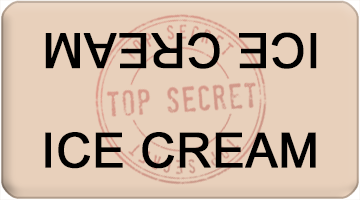
<style>
.page{position:relative;width:360px;height:200px;background:#e8d0bb}
.page>*{position:absolute;margin:0}
.t1{font:48px "ArialMT";color:#000000;font-weight:bold}
</style>
<div class="page">
<p class="t1" style="left:45px;top:32px;width:272px;height:37px;rotate:180deg">ICE CREAM</p>
<p class="t1" style="left:45px;top:132px;width:271px;height:37px">ICE CREAM</p>
</div>
